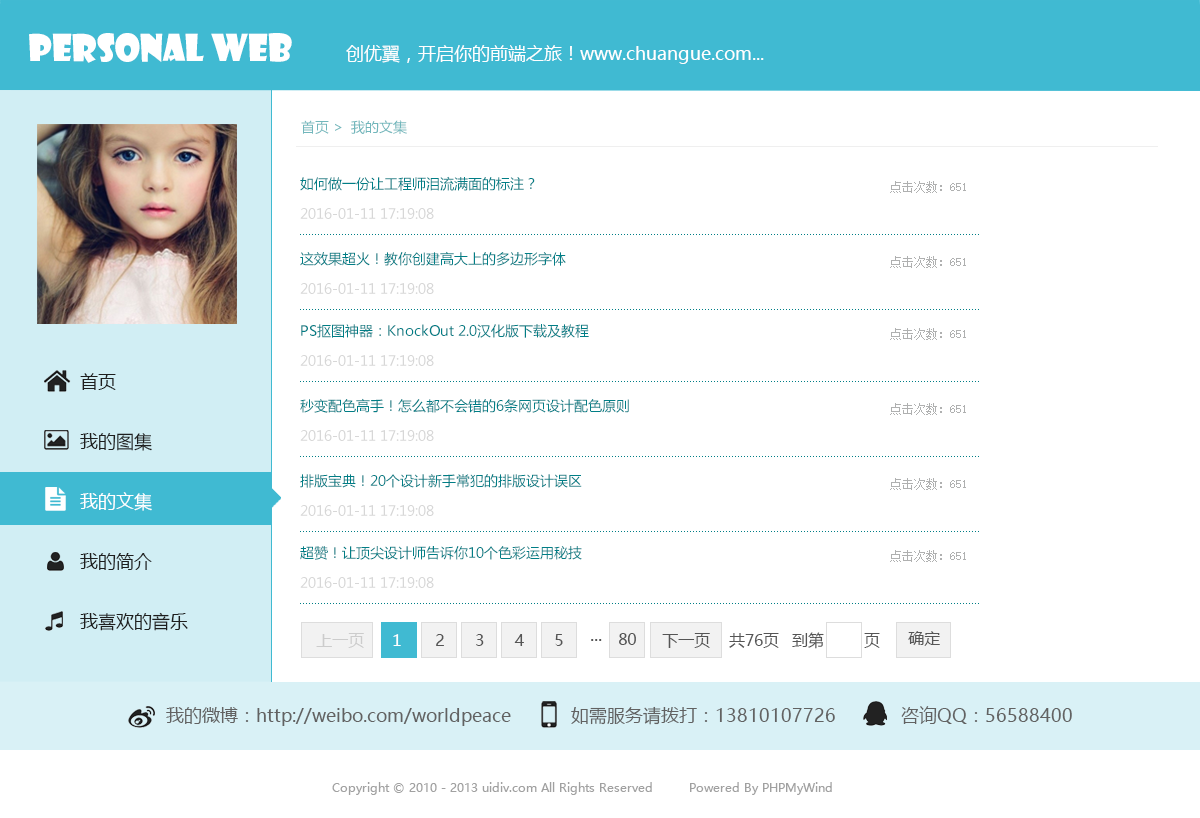
<style>
.page{position:relative;width:1200px;height:818px;background:#ffffff}
.page>*{position:absolute;margin:0}
.t1{font:36px "ShowcardGothic";color:#ffffff}
.t2{font:18px "MicrosoftYaHei";color:#ffffff}
.t3{font:14px "MicrosoftYaHei";color:#72b7bc}
.t4{font:14px/30px "MicrosoftYaHei";color:#d7d7d7}
.t5{font:14px/30px "MicrosoftYaHei";color:#007e86}
.t6{font:12px "SimSun";color:#afb0b0}
.t7{font:18px/30px "MicrosoftYaHei";color:#1e1e1e}
.t8{font:18px/30px "MicrosoftYaHei";color:#ffffff}
.t9{font:16px "MicrosoftYaHei";color:#cccccc}
.t10{font:16px "MicrosoftYaHei";color:#ffffff}
.t11{font:16px "MicrosoftYaHei";letter-spacing:1.92em;color:#555555}
.t12{font:18px "MicrosoftYaHei";color:#555555}
.t13{font:16px "MicrosoftYaHei";color:#555555}
.t14{font:18px "MicrosoftYaHei";color:#616161}
.t15{font:12px "MicrosoftYaHei";color:#a2a2a2}
</style>
<div class="page">
<p class="t1" style="left:29px;top:33px;width:263px;height:30px">personal web</p>
<p class="t2" style="left:346px;top:45px;width:418px;height:19px">创优翼，开启你的前端之旅！www.chuangue.com...</p>
<p class="t3" style="left:301px;top:120px;width:106px;height:14px">首页 &gt;  我的文集</p>
<p class="t4" style="left:300px;top:176px;width:235px;height:43px"><span class="t5">如何做一份让工程师泪流满面的标注？ <br></span>2016-01-11 17:19:08</p>
<p class="t6" style="left:890px;top:181px;width:76px;height:12px">点击次数：651</p>
<p class="t5" style="left:300px;top:251px;width:266px;height:43px">这效果超火！教你创建高大上的多边形字体<br><span class="t4">2016-01-11 17:19:08</span></p>
<p class="t6" style="left:890px;top:256px;width:76px;height:12px">点击次数：651</p>
<p class="t5" style="left:300px;top:324px;width:289px;height:42px">PS抠图神器：KnockOut 2.0汉化版下载及教程  <br><span class="t4">2016-01-11 17:19:08</span></p>
<p class="t6" style="left:890px;top:328px;width:76px;height:12px">点击次数：651</p>
<p class="t7" style="left:80px;top:373px;width:108px;height:258px">首页<br><br>我的图集<br><br><span class="t8">我的文集<br></span><br>我的简介<br><br>我喜欢的音乐</p>
<p class="t5" style="left:300px;top:398px;width:329px;height:43px">秒变配色高手！怎么都不会错的6条网页设计配色原则  <br><span class="t4">2016-01-11 17:19:08</span></p>
<p class="t6" style="left:890px;top:403px;width:76px;height:12px">点击次数：651</p>
<p class="t5" style="left:300px;top:474px;width:282px;height:42px">排版宝典！20个设计新手常犯的排版设计误区<br><span class="t4">2016-01-11 17:19:08</span></p>
<p class="t6" style="left:890px;top:478px;width:76px;height:12px">点击次数：651</p>
<p class="t5" style="left:300px;top:546px;width:282px;height:42px">超赞！让顶尖设计师告诉你10个色彩运用秘技  <br><span class="t4">2016-01-11 17:19:08</span></p>
<p class="t6" style="left:890px;top:550px;width:76px;height:12px">点击次数：651</p>
<p class="t9" style="left:316px;top:633px;width:48px;height:15px">上一页</p>
<p class="t10" style="left:393px;top:634px;width:8px;height:12px">1</p>
<p class="t11" style="left:436px;top:634px;width:127px;height:12px">2345</p>
<p class="t12" style="left:591px;top:639px;width:11px;height:2px">...</p>
<p class="t13" style="left:619px;top:633px;width:17px;height:12px">80</p>
<p class="t13" style="left:662px;top:633px;width:48px;height:15px">下一页</p>
<p class="t13" style="left:729px;top:633px;width:50px;height:15px">共76页</p>
<p class="t13" style="left:792px;top:632px;width:88px;height:17px">到第        页</p>
<p class="t13" style="left:908px;top:631px;width:32px;height:15px">确定</p>
<p class="t14" style="left:166px;top:706px;width:906px;height:20px">我的微博：http://weibo.com/worldpeace            如需服务请拨打：13810107726             咨询QQ：56588400</p>
<p class="t15" style="left:332px;top:782px;width:500px;height:13px">Copyright © 2010 - 2013 uidiv.com All Rights Reserved         Powered By PHPMyWind</p>
</div>
